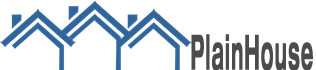
<style>
.page{position:relative;width:316px;height:70px;background:#ffffff}
.page>*{position:absolute;margin:0}
.t1{font:48px "HelveticaNeueLTPro-BdEx";letter-spacing:0.05em;color:#4c4c4c;font-weight:bold;scale:0.34 1}
</style>
<div class="page">
<p class="t1" style="left:191px;top:34px;width:122px;height:37px">PlainHouse</p>
</div>
